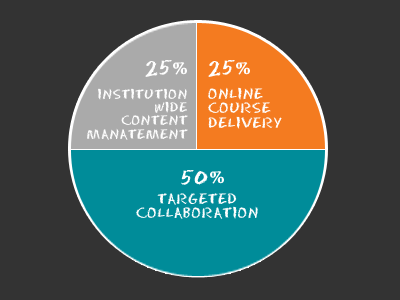
<style>
.page{position:relative;width:400px;height:300px;background:#333333}
.page>*{position:absolute;margin:0}
.t1{font:18px "ChalkDustRegularSWFTE";letter-spacing:0.085em;color:#fefefe;text-transform:uppercase}
.t2{font:18px "ChaparralPro-Bold";letter-spacing:0.085em;color:#fefefe;text-transform:uppercase}
.t3{font:11px "ChalkDustRegularSWFTE";letter-spacing:0.085em;color:#fefefe;text-transform:uppercase}
.t4{font:12px "ChalkDustRegularSWFTE";letter-spacing:0.085em;color:#fefefe;text-transform:uppercase}
</style>
<div class="page">
<p class="t1" style="left:145px;top:60px;width:27px;height:17px">25%</p>
<p class="t2" style="left:173px;top:62px;width:14px;height:13px">%</p>
<p class="t1" style="left:208px;top:60px;width:27px;height:17px">25%</p>
<p class="t2" style="left:236px;top:62px;width:14px;height:13px">%</p>
<p class="t3" style="left:87px;top:88px;width:101px;height:52px;text-align:right">Institution<br>Wide<br>Content<br>Manatement</p>
<p class="t4" style="left:208px;top:87px;width:74px;height:42px">Online<br>Course<br>Delivery</p>
<p class="t1" style="left:181px;top:170px;width:27px;height:15px">50%</p>
<p class="t2" style="left:210px;top:171px;width:14px;height:13px">%</p>
<p class="t4" style="left:136px;top:193px;width:122px;height:26px;text-align:center">targeted<br>collaboration</p>
</div>
